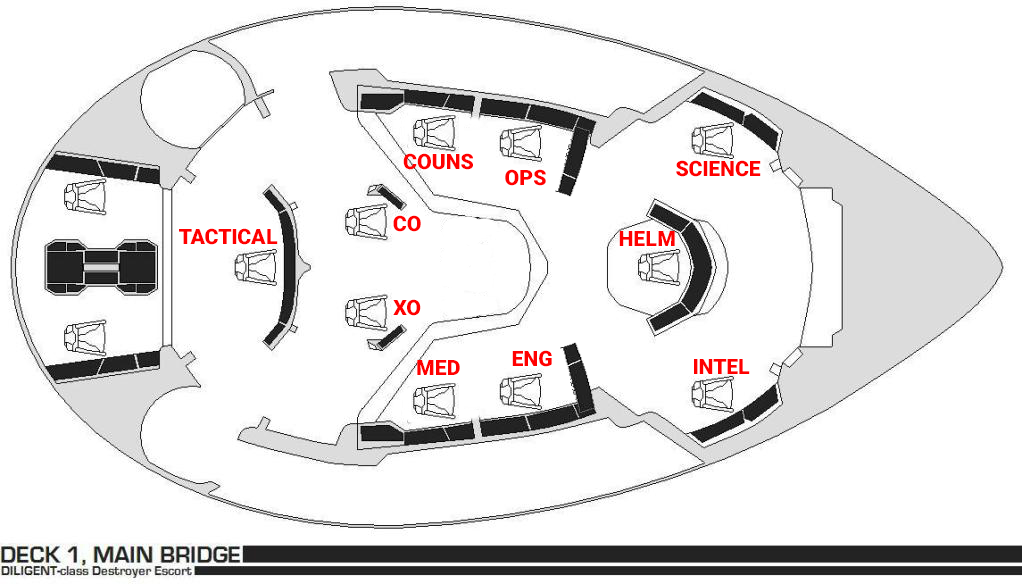
<style>
.page{position:relative;width:1022px;height:584px;background:#ffffff}
.page>*{position:absolute;margin:0}
.t1{font:21.3px "Roboto-Black";letter-spacing:-0.005em;color:#ff0000}
</style>
<div class="page">
<p class="t1" style="left:403px;top:153px;width:70px;height:17px">COUNS</p>
<p class="t1" style="left:676px;top:160px;width:85px;height:17px">SCIENCE</p>
<p class="t1" style="left:505px;top:169px;width:41px;height:17px">OPS</p>
<p class="t1" style="left:393px;top:215px;width:28px;height:17px">CO</p>
<p class="t1" style="left:179px;top:228px;width:99px;height:17px">TACTICAL</p>
<p class="t1" style="left:619px;top:231px;width:56px;height:15px">HELM</p>
<p class="t1" style="left:393px;top:299px;width:28px;height:17px">XO</p>
<p class="t1" style="left:512px;top:350px;width:40px;height:17px">ENG</p>
<p class="t1" style="left:417px;top:360px;width:43px;height:15px">MED</p>
<p class="t1" style="left:694px;top:359px;width:56px;height:15px">INTEL</p>
</div>
